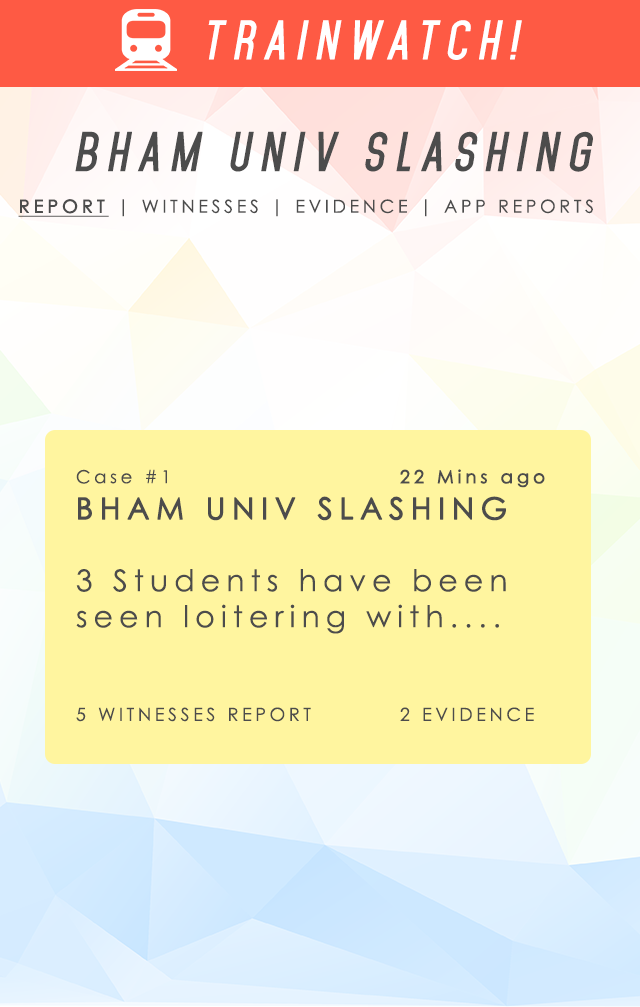
<style>
.page{position:relative;width:640px;height:1007px;background:#fff59f}
.page>*{position:absolute;margin:0}
.t1{font:48px "Mohave-BoldItalic";letter-spacing:0.2em;color:#ffffff;text-transform:uppercase}
.t2{font:48px "Mohave-BoldItalic";letter-spacing:0.2em;color:#4c4c4c;text-transform:uppercase}
.t3{font:18px "CenturyGothic";letter-spacing:0.2em;color:#4c4c4c}
.t4{font:18px "CenturyGothic";letter-spacing:0.2em;color:#4c4c4c;font-weight:bold;text-decoration:underline}
.t5{font:30px "CenturyGothic";letter-spacing:0.2em;color:#4c4c4c}
.t6{font:18px "CenturyGothic";letter-spacing:0.2em;color:#4c4c4c;font-weight:bold}
.t7{font:30px "CenturyGothic";letter-spacing:0.2em;color:#4c4c4c;font-weight:bold}
</style>
<div class="page">
<p class="t1" style="left:208px;top:20px;width:314px;height:40px">Trainwatch!</p>
<p class="t2" style="left:75px;top:131px;width:518px;height:41px">BHAM UNIV SLashing</p>
<p class="t3" style="left:18px;top:199px;width:575px;height:18px"><span class="t4">REPORT</span> | WITNESSES | EVIDENCE | APP REPORTS</p>
<p class="t5" style="left:76px;top:469px;width:469px;height:253px"><span class="t3">Case #1       </span><span class="t6">22 Mins ago<br></span><span class="t7">BHAM UNIV SLASHING<br></span><br>3 Students have been<br>seen loitering with....<br><br><br><span class="t3">5 WITNESSES REPORT   2 EVIDENCE</span></p>
</div>
